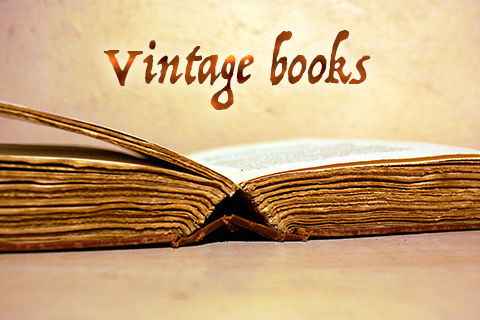
<style>
.page{position:relative;width:480px;height:320px}
.page>*{position:absolute;margin:0}
.t1{font:59px "Trattatello"}
</style>
<div class="page">
<p class="t1" style="left:103px;top:30px;width:268px;height:80px">Vintage books</p>
</div>
